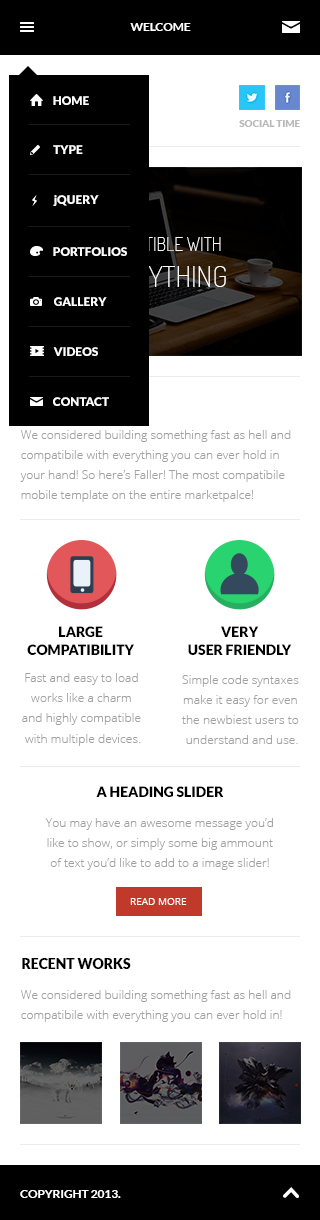
<style>
.page{position:relative;width:320px;height:1220px;background:#ffffff}
.page>*{position:absolute;margin:0}
.t1{font:12px "Lato-Bold";letter-spacing:-0.01em;color:#ffffff}
.t2{font:12px "Lato-Black";color:#ffffff}
.t3{font:10px "Lato-Black";letter-spacing:-0.01em;color:#b9b9b9}
.t4{font:18px/36px "Dosis-ExtraLight"}
.t5{font:28px/36px "Dosis-ExtraLight"}
.t6{font:12px/20px "OpenSans-Light";color:#a1a1a1}
.t7{font:14px/17.8px "Lato-Black";color:#000000}
.t8{font:12.1px/20.2px "OpenSans-Light";color:#a1a1a1}
.t9{font:14px "Lato-Black";color:#000000}
.t10{font:12px/20.2px "OpenSans-Light";color:#a1a1a1}
.t11{font:10px "OpenSans";color:#ffffff}
</style>
<div class="page">
<p class="t1" style="left:130px;top:23px;width:61px;height:8px">WELCOME</p>
<p class="t2" style="left:53px;top:96px;width:36px;height:9px">HOME</p>
<p class="t3" style="left:239px;top:120px;width:61px;height:7px">SOCIAL TIME</p>
<p class="t2" style="left:53px;top:145px;width:30px;height:9px">TYPE</p>
<p class="t2" style="left:53px;top:195px;width:46px;height:11px">jQUERY</p>
<p class="t4" style="left:94px;top:237px;width:132px;height:50px;text-align:center">COMPATIBLE WITH<br><span class="t5">EVERYTHING</span></p>
<p class="t2" style="left:53px;top:247px;width:74px;height:9px">PORTFOLIOS</p>
<p class="t2" style="left:54px;top:297px;width:53px;height:9px">GALLERY</p>
<p class="t2" style="left:53px;top:347px;width:45px;height:9px">VIDEOS</p>
<p class="t2" style="left:53px;top:397px;width:56px;height:9px">CONTACT</p>
<p class="t6" style="left:20px;top:430px;width:271px;height:72px">We considered building something fast as hell and compatibile with everything you can ever hold in your hand! So here’s Faller! The most compatibile mobile template on the entire marketpalce!</p>
<p class="t7" style="left:27px;top:626px;width:107px;height:29px;text-align:center">LARGE<br>COMPATIBILITY</p>
<p class="t7" style="left:188px;top:626px;width:104px;height:29px;text-align:center">VERY<br>USER FRIENDLY</p>
<p class="t8" style="left:22px;top:673px;width:119px;height:73px;text-align:center">Fast and easy to load <br>works like a charm <br>and highly compatible <br>with multiple devices.</p>
<p class="t8" style="left:182px;top:675px;width:117px;height:69px;text-align:center">Simple code syntaxes <br>make it easy for even <br>the newbiest users to <br>understand and use.</p>
<p class="t9" style="left:96px;top:786px;width:128px;height:11px">A HEADING SLIDER</p>
<p class="t10" style="left:45px;top:818px;width:228px;height:52px;text-align:center">You may have an awesome message you’d<br>like to show, or simply some big ammount<br>of text you’d like to add to a image slider!</p>
<p class="t11" style="left:130px;top:898px;width:57px;height:7px">READ MORE</p>
<p class="t9" style="left:22px;top:958px;width:109px;height:11px">RECENT WORKS</p>
<p class="t6" style="left:21px;top:990px;width:270px;height:32px">We considered building something fast as hell and compatibile with everything you can ever hold in!</p>
<p class="t1" style="left:20px;top:1190px;width:101px;height:8px">COPYRIGHT 2013.</p>
</div>
